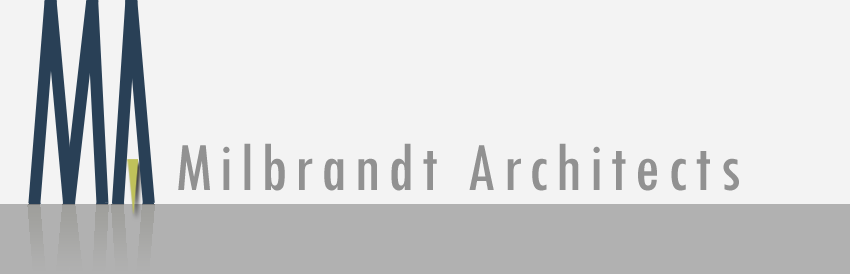
<style>
.page{position:relative;width:850px;height:274px;background:#f3f3f3}
.page>*{position:absolute;margin:0}
.t1{font:72px "TwCenMT-Condensed";letter-spacing:0.103em;color:#919191}
</style>
<div class="page">
<p class="t1" style="left:178px;top:143px;width:561px;height:48px">Milbrandt Architects</p>
</div>
